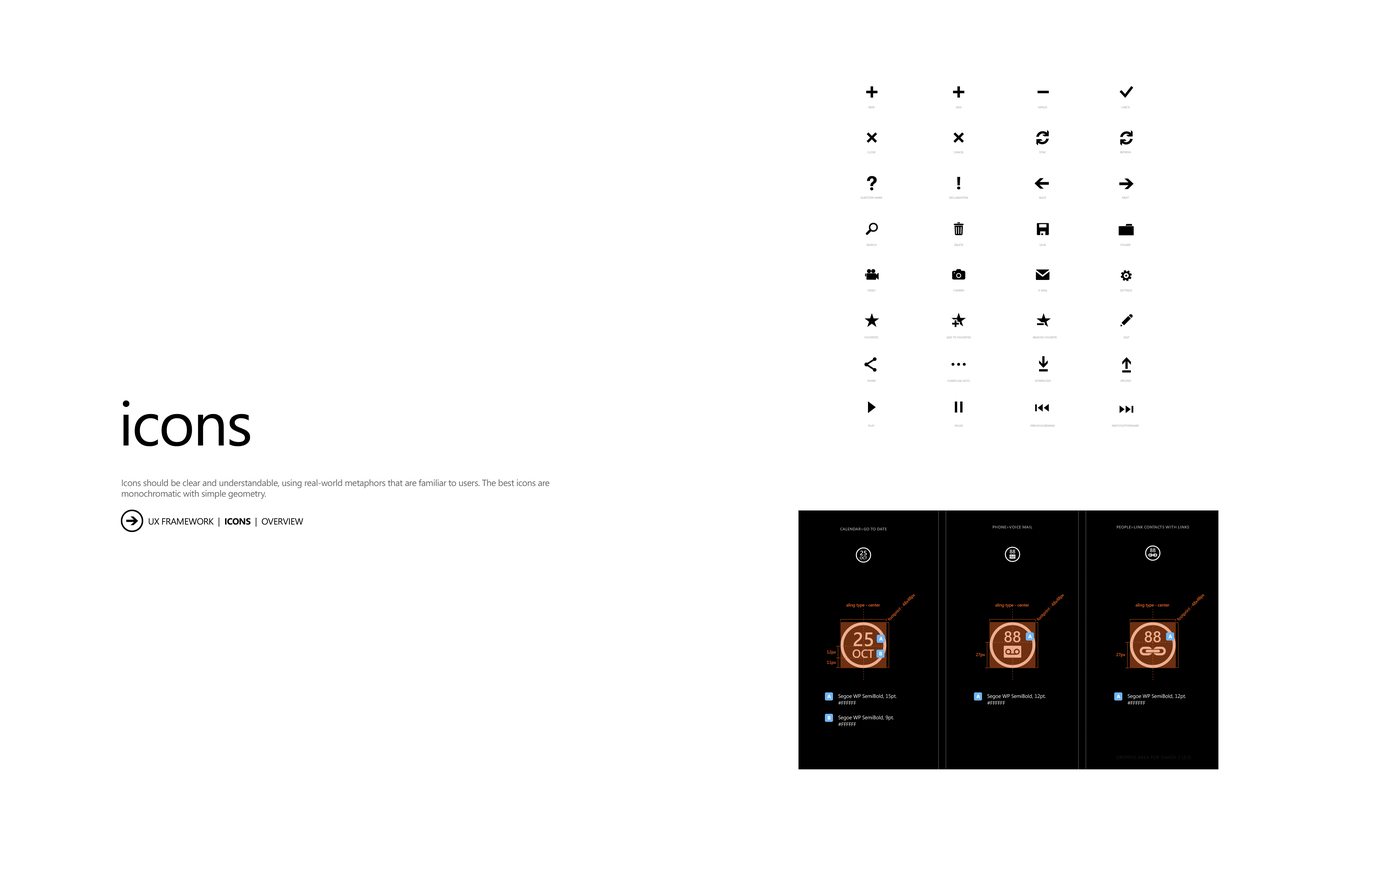
<style>
.page{position:relative;width:1377px;height:891px;background:#ffffff}
.page>*{position:absolute;margin:0}
.t1{font:61.5px "SegoeWP";letter-spacing:-0.025em;color:#000000}
.t2{font:9px "SegoeWP";letter-spacing:-0.025em;color:#666666}
.t3{font:9px "SegoeWP";letter-spacing:-0.025em;color:#000000}
.t4{font:9px "SegoeWP-Bold";letter-spacing:-0.025em;color:#000000}
</style>
<div class="page">
<p class="t1" style="left:123px;top:400px;width:127px;height:46px">icons</p>
<p class="t2" style="left:122px;top:479px;width:428px;height:20px">Icons should be clear and understandable, using real-world metaphors that are familiar to users. The best icons are monochromatic with simple geometry.</p>
<p class="t3" style="left:149px;top:517px;width:154px;height:10px">UX FRAMEWORK  |  <span class="t4">ICONS</span>  |  OVERVIEW</p>
</div>
